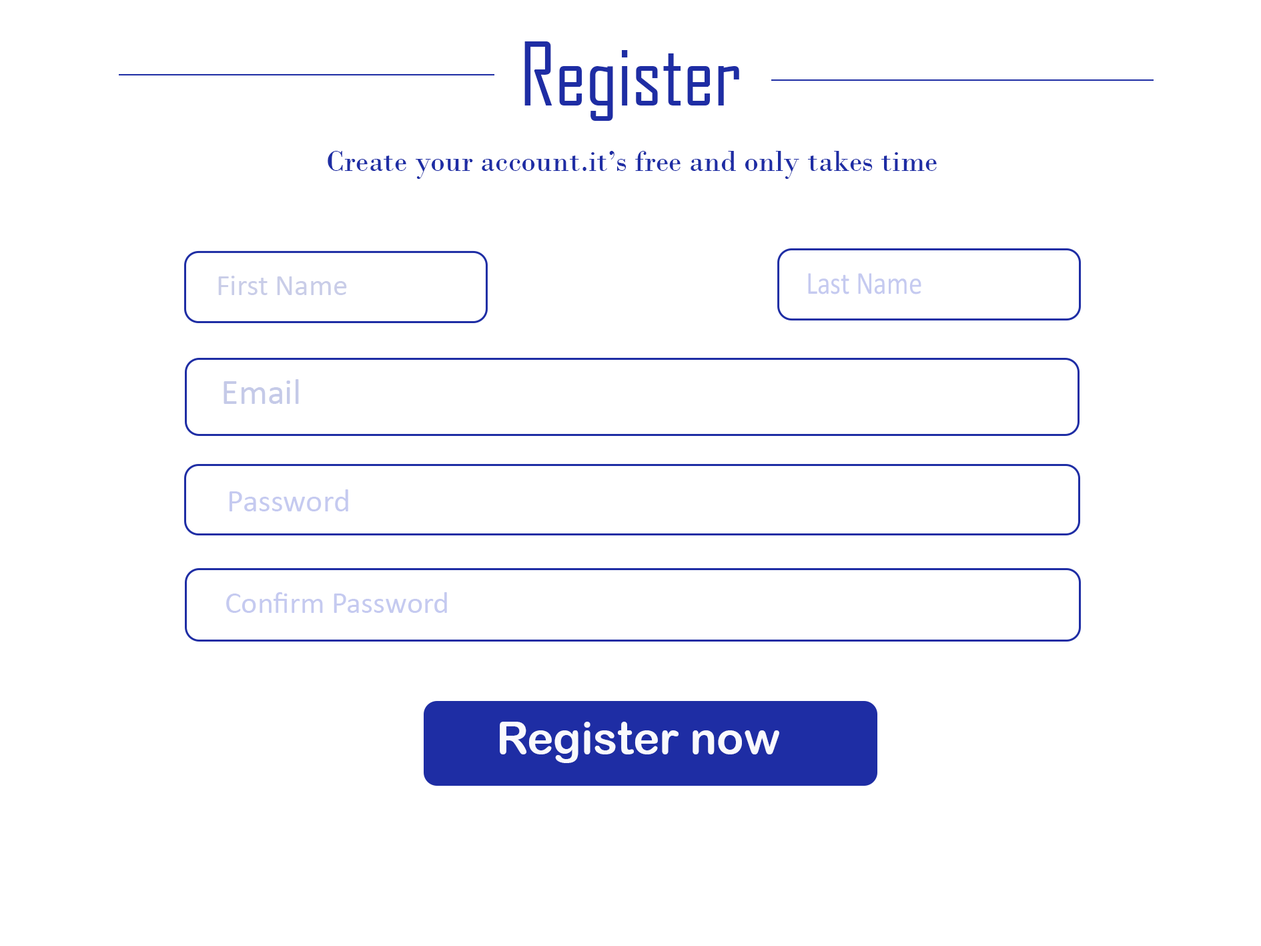
<style>
.page{position:relative;width:1261px;height:946px;background:#ffffff}
.page>*{position:absolute;margin:0}
.t1{font:83.1px "AgencyFB-Reg";color:#1e2da4}
.t2{font:30.3px "BodoniMT";color:#1e2da4}
.t3{font:30.1px "Calibri";color:#c9cde8}
.t4{font:32.2px "Calibri";color:#c5caf0;scale:0.85 1}
.t5{font:35.9px "Calibri";color:#c5cae8}
.t6{font:32.2px "Calibri";color:#c5caf0}
.t7{font:30.6px "Calibri";color:#c5caf0}
.t8{font:44.5px "ArialRoundedMTBold";color:#f9f9fc}
</style>
<div class="page">
<p class="t1" style="left:524px;top:41px;width:215px;height:80px">Register</p>
<p class="t2" style="left:328px;top:151px;width:609px;height:28px">Create your account.it’s free and only takes time</p>
<p class="t3" style="left:218px;top:276px;width:129px;height:19px">First Name</p>
<p class="t4" style="left:808px;top:273px;width:113px;height:21px">Last Name</p>
<p class="t5" style="left:224px;top:379px;width:75px;height:25px">Email</p>
<p class="t6" style="left:230px;top:489px;width:118px;height:22px">Password</p>
<p class="t7" style="left:226px;top:592px;width:221px;height:21px">Confirm Password</p>
<p class="t8" style="left:500px;top:721px;width:279px;height:42px">Register now</p>
</div>
